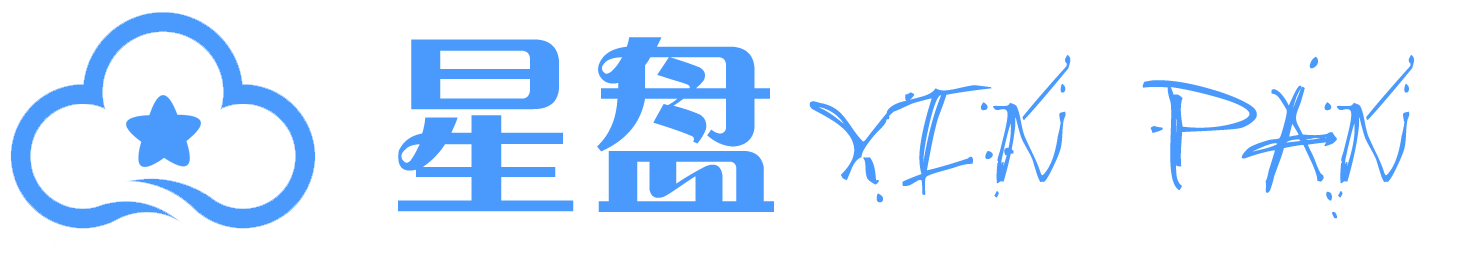
<style>
.page{position:relative;width:1464px;height:257px;background:#ffffff}
.page>*{position:absolute;margin:0}
.t1{font:204px "FZCHYJW--GB1-0";color:#4a9afd}
.t2{font:136px "JungleRuff";color:#4a9afd;font-weight:bold}
</style>
<div class="page">
<p class="t1" style="left:398px;top:37px;width:376px;height:175px">星盘</p>
<p class="t2" style="left:809px;top:55px;width:605px;height:164px">Xin  pan</p>
</div>
